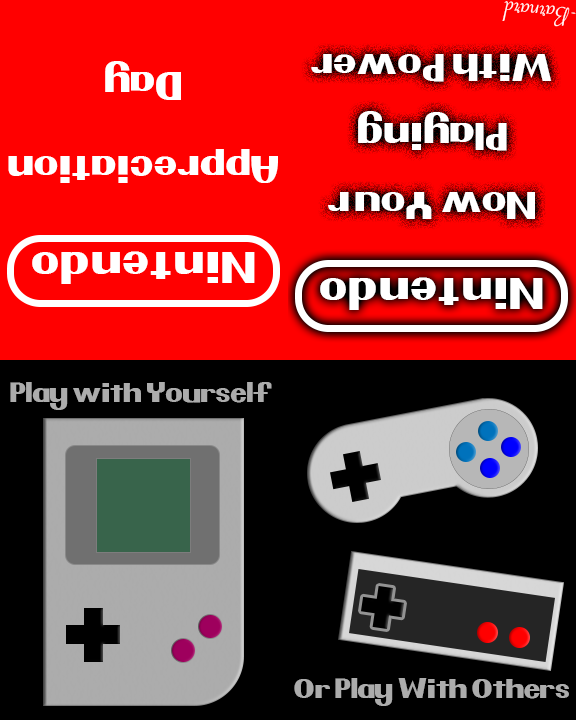
<style>
.page{position:relative;width:576px;height:720px;background:#ff0000}
.page>*{position:absolute;margin:0}
.t1{font:29.2px "SavoyeLetPlain";color:#ffffff}
.t2{font:35px/69px "Pretendo";letter-spacing:0.025em;color:#ffffff}
.t3{font:35px "Pretendo";letter-spacing:0.025em;color:#ffffff}
.t4{font:40px "Pretendo";letter-spacing:0.05em;color:#ffffff}
.t5{font:25px "Pretendo";color:#acacac}
</style>
<div class="page">
<p class="t1" style="left:502px;top:1px;width:74px;height:26px;rotate:-174deg">-Barnard</p>
<p class="t2" style="left:311px;top:54px;width:241px;height:165px;text-align:center;rotate:180deg">Now You’r<br>Playing<br>With Power</p>
<p class="t3" style="left:8px;top:61px;width:270px;height:122px;text-align:center;rotate:180deg">Appreciation<br><br>Day</p>
<p class="t4" style="left:32px;top:251px;width:223px;height:33px;rotate:180deg">Nintendo</p>
<p class="t4" style="left:320px;top:277px;width:223px;height:33px;rotate:180deg">Nintendo</p>
<p class="t5" style="left:10px;top:382px;width:262px;height:28px">Play with Yourself</p>
<p class="t5" style="left:294px;top:678px;width:275px;height:28px">Or Play With Others</p>
</div>
